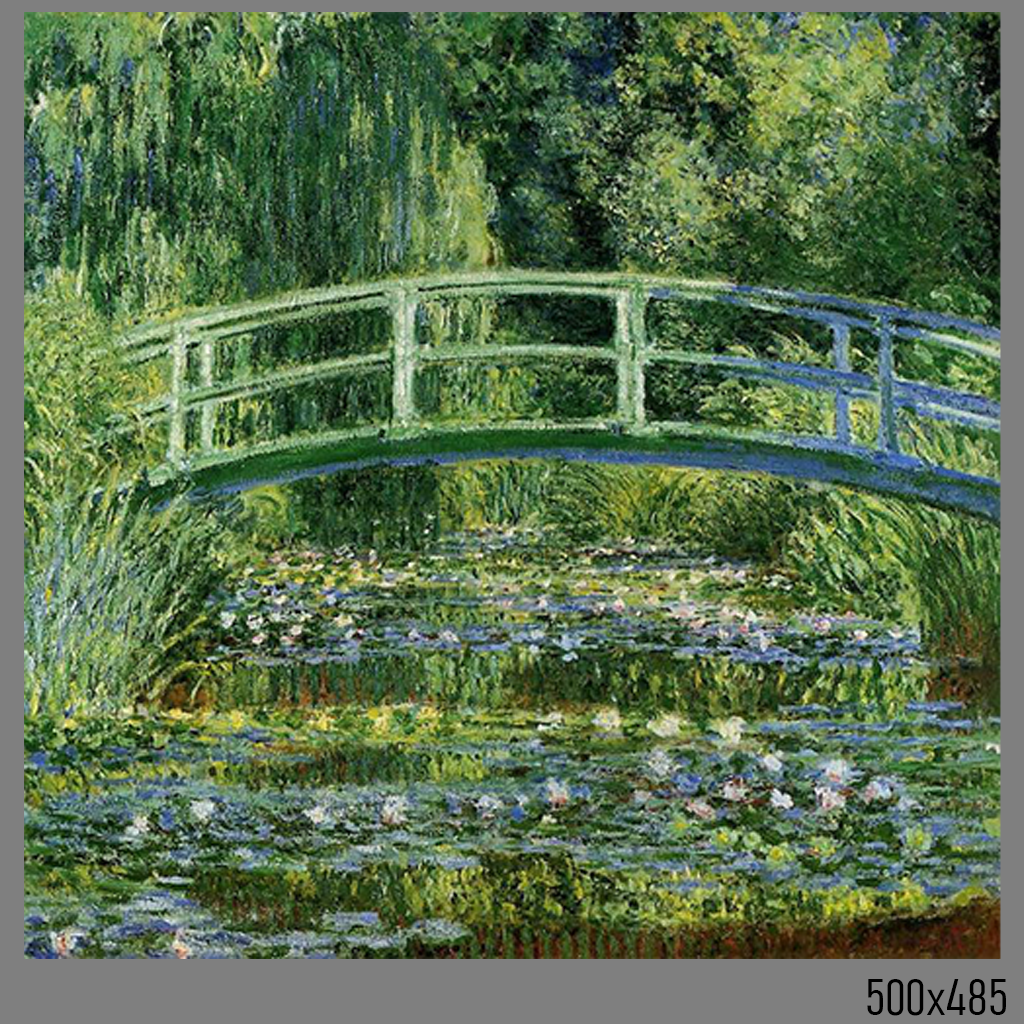
<style>
.page{position:relative;width:1024px;height:1024px}
.page>*{position:absolute;margin:0}
.t1{font:50px "Bahnschrift-LightCondensed";color:#000000}
</style>
<div class="page">
<p class="t1" style="left:867px;top:979px;width:139px;height:37px">500x485</p>
</div>
